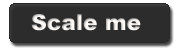
<style>
.page{position:relative;width:180px;height:50px;background:#2c2c2c}
.page>*{position:absolute;margin:0}
.t1{font:22px "Arial-Black";color:#fffcf9}
</style>
<div class="page">
<p class="t1" style="left:31px;top:14px;width:110px;height:17px">Scale me</p>
</div>
